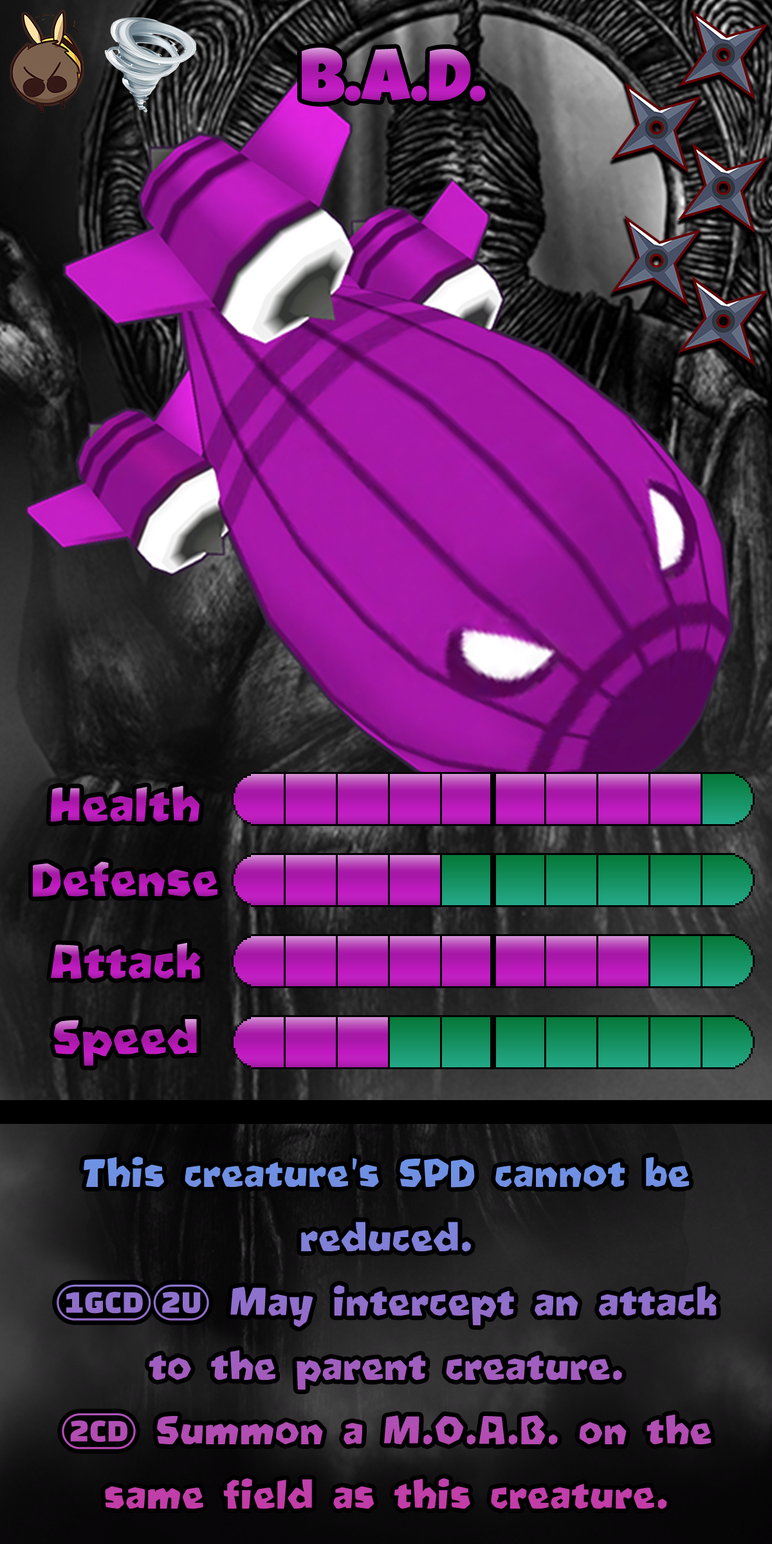
<style>
.page{position:relative;width:772px;height:1544px}
.page>*{position:absolute;margin:0}
.t1{font:128.7px "LuckiestGuy-Regular";color:#b81db8}
.t2{font:77.2px "Oetztype";color:#b31ab4}
.t3{font:77.2px "Oetztype";color:#b41ab5}
.t4{font:77.2px "Oetztype";color:#b119b2}
.t5{font:64.3px/64.3px "Oetztype"}
.t6{font:64.3px/64.3px "stoogedings-Regular"}
</style>
<div class="page">
<p class="t1" style="left:302px;top:48px;width:184px;height:54px">B.A.D.</p>
<p class="t2" style="left:50px;top:786px;width:150px;height:36px">Health</p>
<p class="t2" style="left:33px;top:862px;width:184px;height:35px">Defense</p>
<p class="t3" style="left:51px;top:943px;width:149px;height:36px">Attack</p>
<p class="t4" style="left:54px;top:1019px;width:143px;height:47px">Speed</p>
<p class="t5" style="left:57px;top:1157px;width:660px;height:353px;text-align:center">This creature's SPD cannot be reduced.<br><span class="t6">(1GCD)(2U)</span> May intercept an attack to the parent creature.<br><span class="t6">(2CD)</span> Summon a M.O.A.B. on the same field as this creature.</p>
</div>
